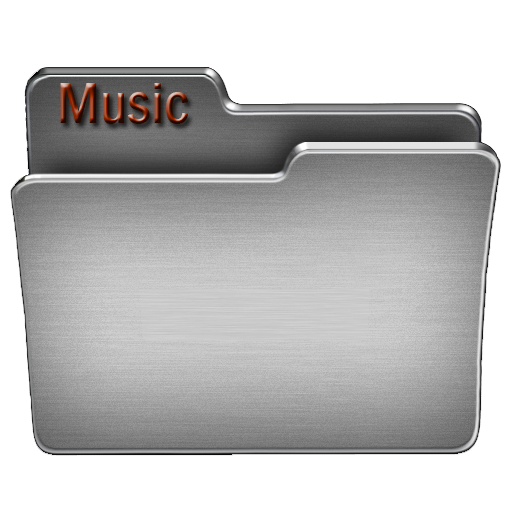
<style>
.page{position:relative;width:512px;height:512px;background:#ffffff}
.page>*{position:absolute;margin:0}
.t1{font:60px "FranklinGothic-MediumCond"}
</style>
<div class="page">
<p class="t1" style="left:60px;top:83px;width:129px;height:41px">Music</p>
</div>
